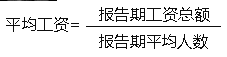
<style>
.page{position:relative;width:227px;height:57px;background:#ffffff}
.page>*{position:absolute;margin:0}
.t1{font:16px "MicrosoftYaHei";letter-spacing:-0.005em;color:#0d0d0d}
</style>
<div class="page">
<p class="t1" style="left:6px;top:17px;width:73px;height:15px">平均工资=</p>
<p class="t1" style="left:99px;top:7px;width:111px;height:15px">报告期工资总额</p>
<p class="t1" style="left:99px;top:34px;width:109px;height:15px">报告期平均人数</p>
</div>
